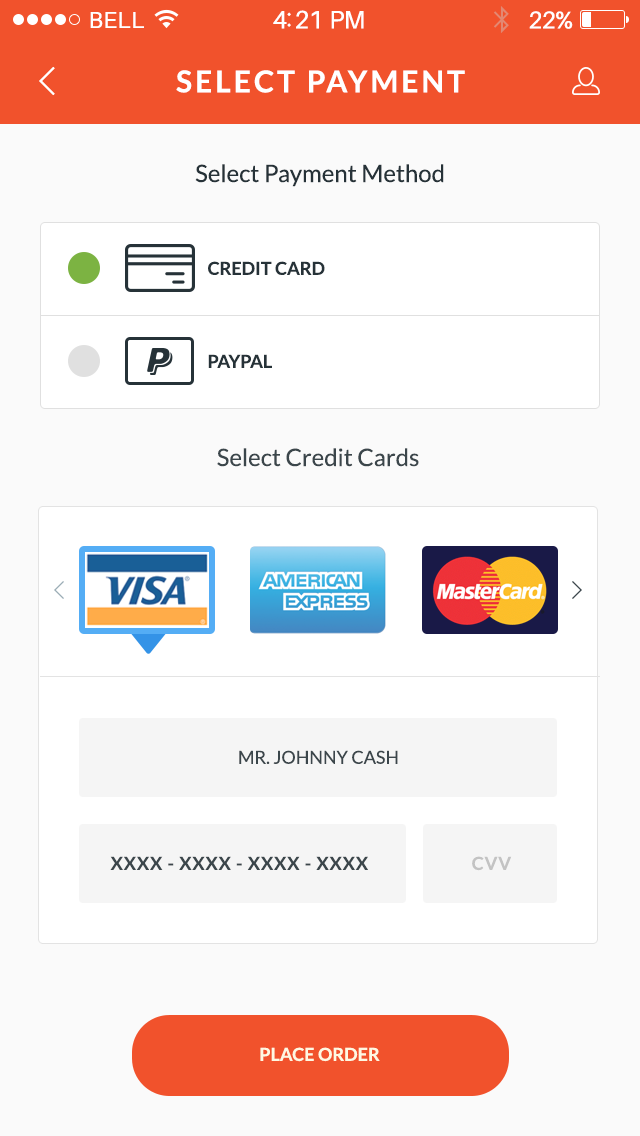
<style>
.page{position:relative;width:640px;height:1136px;background:#fafafa}
.page>*{position:absolute;margin:0}
.t1{font:23px "Aileron-Regular";letter-spacing:0.02em;color:#ffffff}
.t2{font:25px "Aileron-Regular";letter-spacing:-0.02em;color:#ffffff}
.t3{font:24px "Aileron-Regular";letter-spacing:-0.02em;color:#ffffff}
.t4{font:30px "Lato-Bold";letter-spacing:0.1em;color:#ffffff;text-transform:uppercase}
.t5{font:24px "Lato-Regular";color:#263238}
.t6{font:18px "Lato-Bold";color:#263238;text-transform:uppercase}
.t7{font:18px/30px "Lato-Regular";color:#263238;text-transform:uppercase}
.t8{font:24px/30px "Lato-Regular";color:#263238}
.t9{font:18px/30px "Lato-Bold";letter-spacing:0.05em;color:#263238;text-transform:uppercase}
.t10{font:24px/30px "Lato-Regular";letter-spacing:0.05em;color:#bdbdbd}
.t11{font:18px/30px "Lato-Bold";letter-spacing:0.05em;color:#bdbdbd;text-transform:uppercase}
.t12{font:18px "Lato-Bold";color:#fef8e2;text-transform:uppercase}
</style>
<div class="page">
<p class="t1" style="left:90px;top:12px;width:54px;height:16px">BELL</p>
<p class="t2" style="left:273px;top:10px;width:91px;height:19px">4:21 PM</p>
<p class="t3" style="left:529px;top:11px;width:44px;height:18px">22%</p>
<p class="t4" style="left:176px;top:70px;width:289px;height:23px">Select Payment</p>
<p class="t5" style="left:195px;top:164px;width:249px;height:23px">Select Payment Method</p>
<p class="t6" style="left:208px;top:261px;width:117px;height:14px">Credit Card</p>
<p class="t6" style="left:208px;top:354px;width:64px;height:14px">Paypal</p>
<p class="t5" style="left:217px;top:448px;width:202px;height:19px">Select Credit Cards</p>
<p class="t7" style="left:239px;top:750px;width:159px;height:14px;text-align:center">Mr. Johnny cash<br><span class="t8">,</span></p>
<p class="t9" style="left:110px;top:856px;width:258px;height:14px">xxxx - xxxx - xxxx - xxxx<br><span class="t10">,</span></p>
<p class="t11" style="left:472px;top:856px;width:40px;height:15px">CVV<br><span class="t10">,</span></p>
<p class="t12" style="left:260px;top:1047px;width:120px;height:15px">Place Order</p>
</div>
